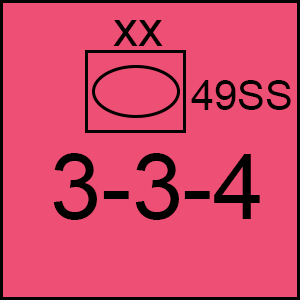
<style>
.page{position:relative;width:300px;height:300px;background:#ee4f74}
.page>*{position:absolute;margin:0}
.t1{font:50px "ArialMT";color:#000000}
.t2{font:41.7px "ArialMT";color:#000000}
.t3{font:91.7px "ArialMT";color:#000000}
</style>
<div class="page">
<p class="t1" style="left:113px;top:20px;width:50px;height:26px">xx</p>
<p class="t2" style="left:191px;top:80px;width:100px;height:30px">49SS</p>
<p class="t3" style="left:53px;top:153px;width:207px;height:67px">3-3-4</p>
</div>
